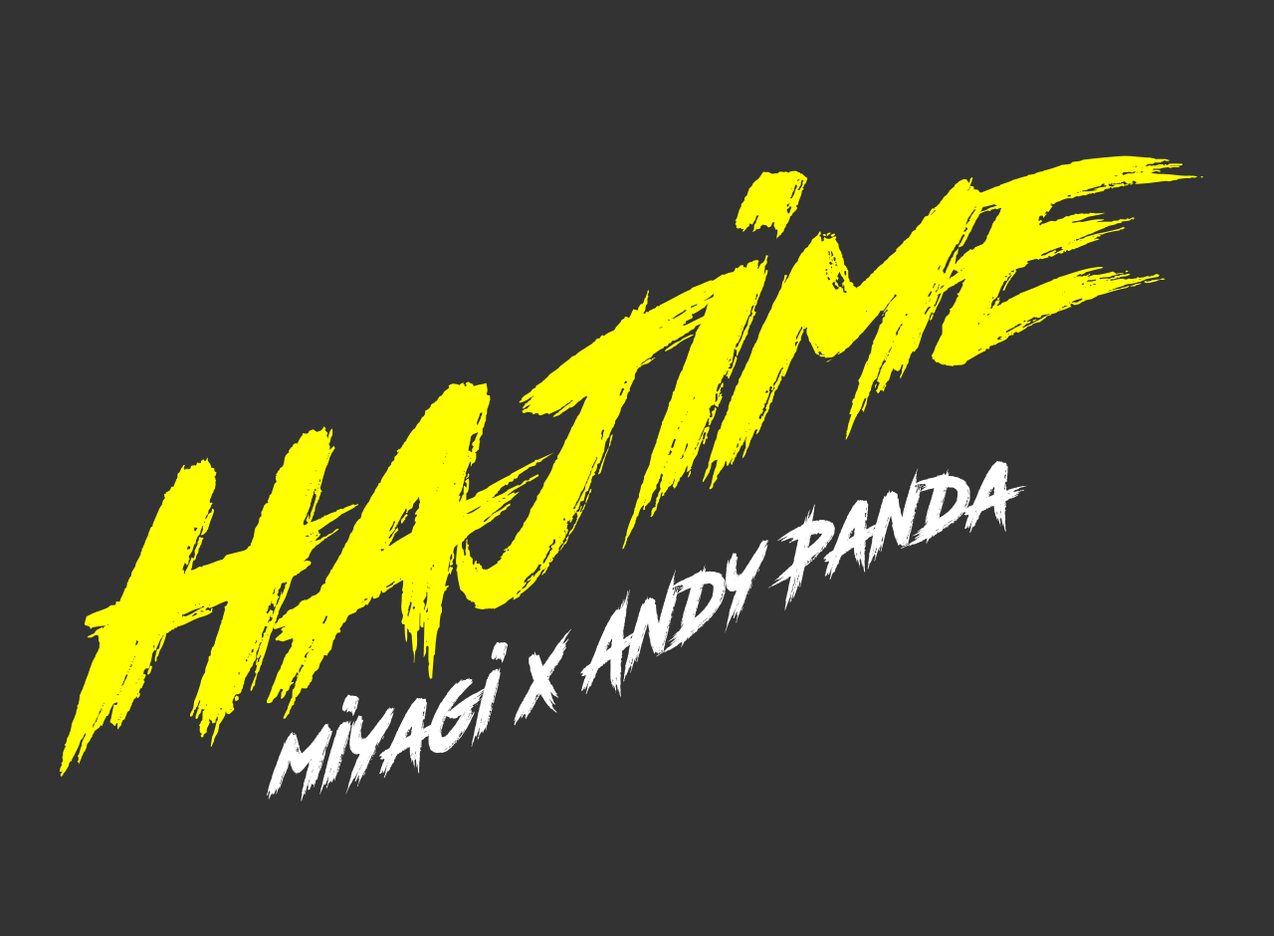
<style>
.page{position:relative;width:1274px;height:936px;background:#333333}
.page>*{position:absolute;margin:0}
.t1{font:298.7px "RoadRage";letter-spacing:-0.025em;color:#ffff00}
.t2{font:83.7px "RoadRage";color:#ffffff;scale:0.86 1}
</style>
<div class="page">
<p class="t1" style="left:59px;top:155px;width:1145px;height:622px;text-align:center">hajime</p>
<p class="t2" style="left:266px;top:461px;width:761px;height:341px;rotate:-6deg">miyagi x Andy Panda</p>
</div>
